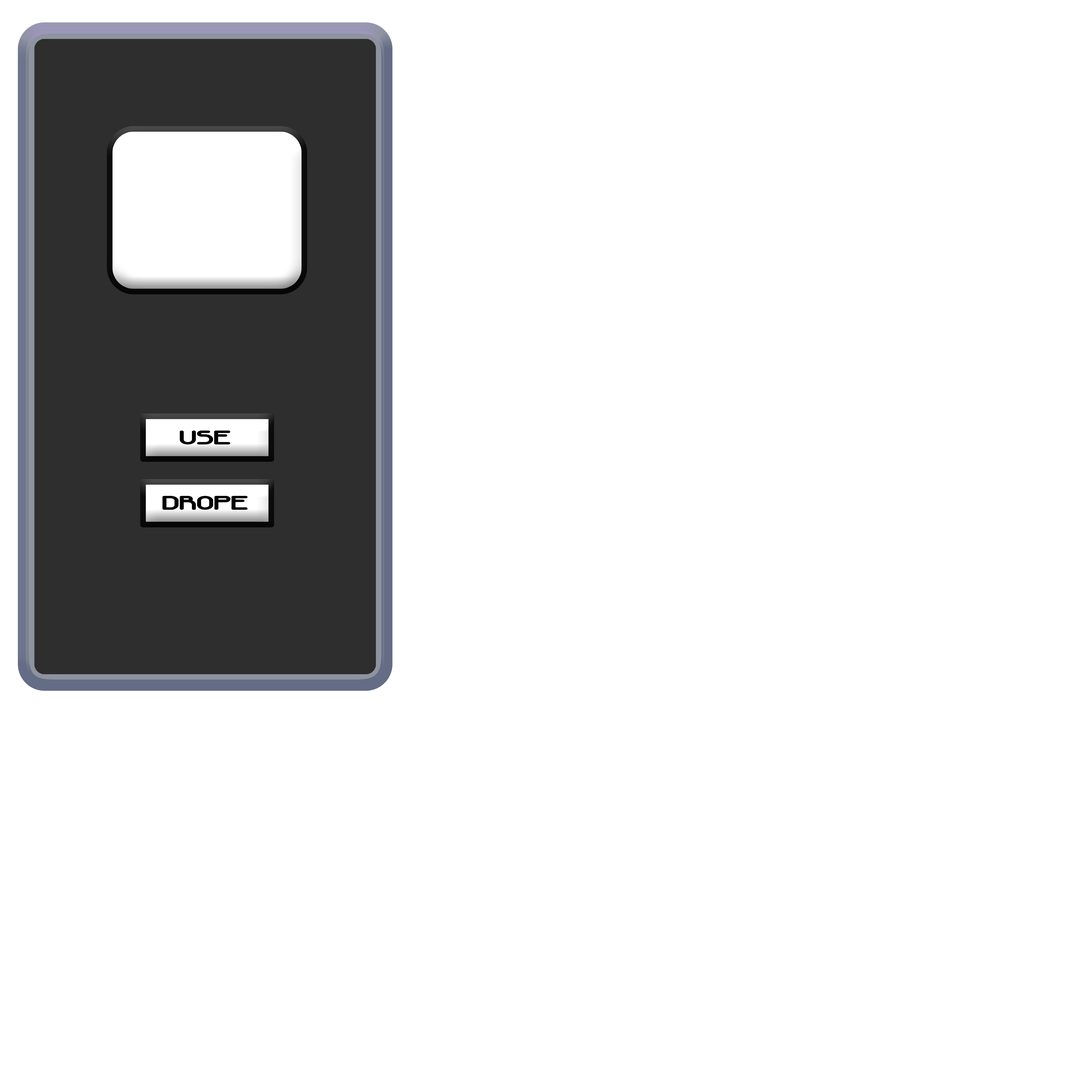
<style>
.page{position:relative;width:1092px;height:1092px;background:#ffffff}
.page>*{position:absolute;margin:0}
.t1{font:20px "AutomaticaBRK";color:#000000}
</style>
<div class="page">
<p class="t1" style="left:180px;top:431px;width:50px;height:13px">USE</p>
<p class="t1" style="left:162px;top:496px;width:86px;height:14px">DROPE</p>
</div>
